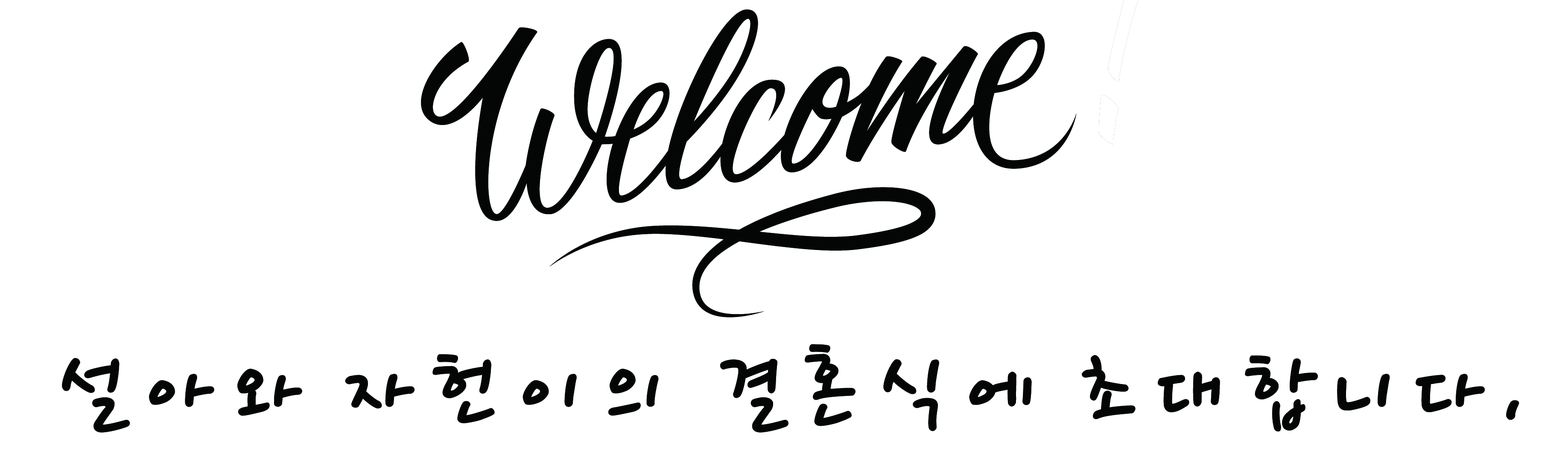
<style>
.page{position:relative;width:1568px;height:451px;background:#ffffff}
.page>*{position:absolute;margin:0}
.t1{font:115.6px "777Lovespring";letter-spacing:0.075em;color:#040606}
</style>
<div class="page">
<p class="t1" style="left:62px;top:344px;width:1457px;height:89px">설아와 자헌이의 결혼식에 초대합니다.</p>
</div>
